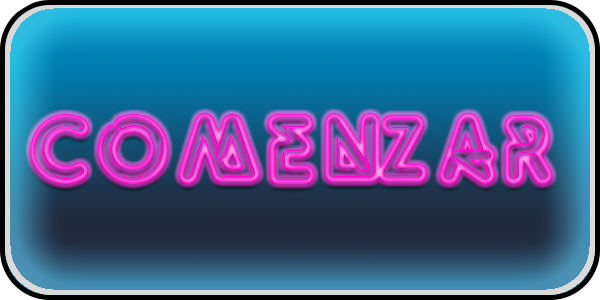
<style>
.page{position:relative;width:600px;height:300px}
.page>*{position:absolute;margin:0}
.t1{font:100px "NeonLights-"}
</style>
<div class="page">
<p class="t1" style="left:30px;top:113px;width:522px;height:71px">COMENZAR</p>
</div>
